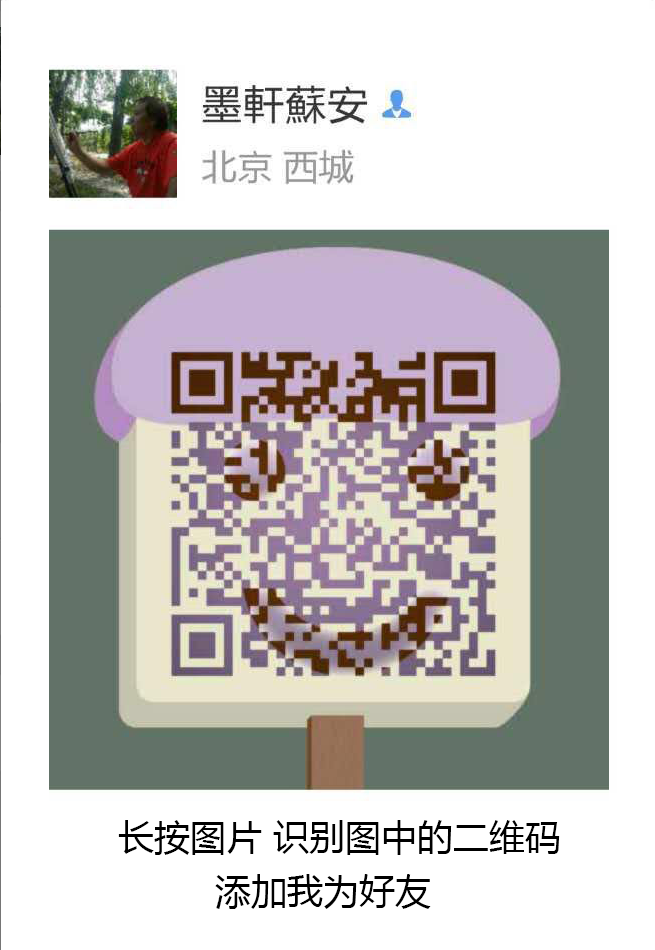
<style>
.page{position:relative;width:655px;height:950px;background:#ffffff}
.page>*{position:absolute;margin:0}
.t1{font:36px "MicrosoftYaHei";color:#000000}
</style>
<div class="page">
<p class="t1" style="left:118px;top:820px;width:442px;height:35px">长按图片 识别图中的二维码</p>
<p class="t1" style="left:215px;top:874px;width:216px;height:35px">添加我为好友</p>
</div>
